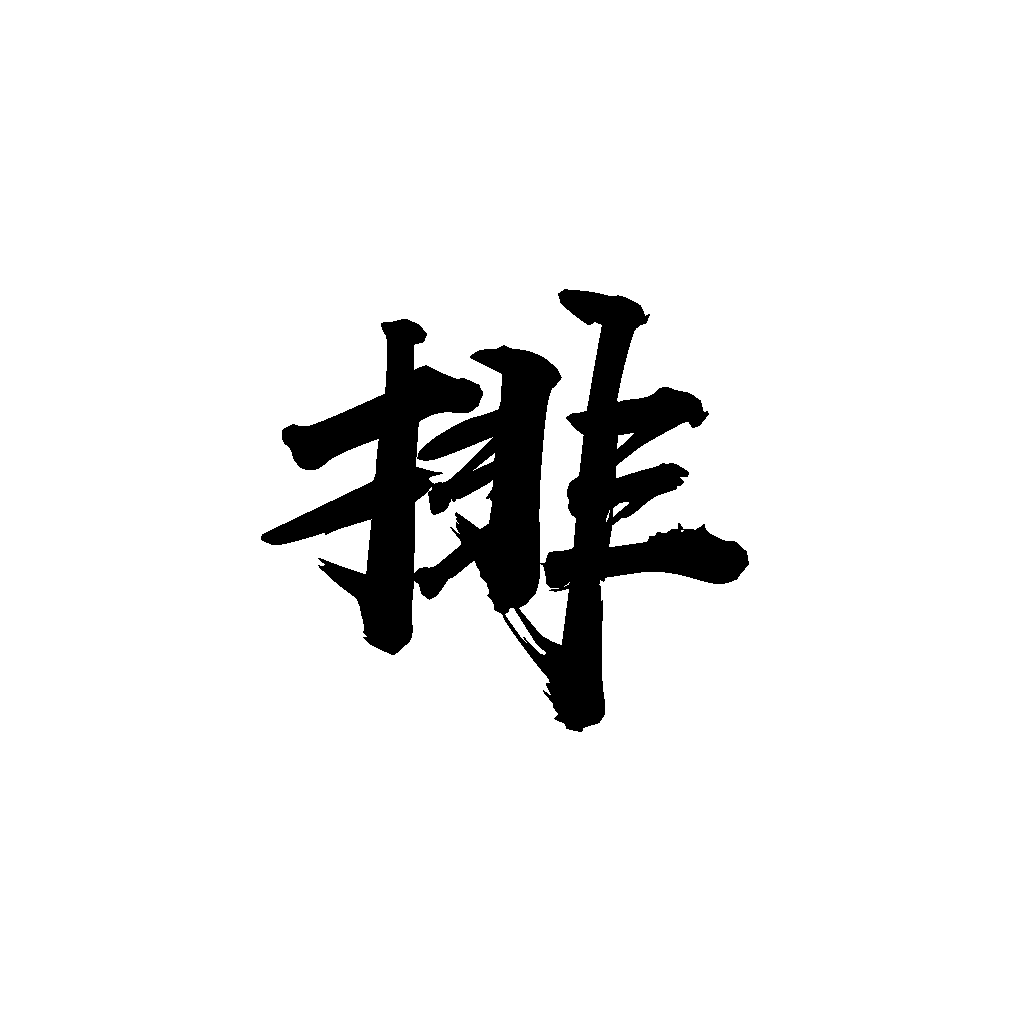
<style>
.page{position:relative;width:1024px;height:1024px;background:#ffffff}
.page>*{position:absolute;margin:0}
.t1{font:512px "HYShangWeiShouShuW-Regular";color:#000000}
</style>
<div class="page">
<p class="t1" style="left:261px;top:289px;width:488px;height:443px">排</p>
</div>
